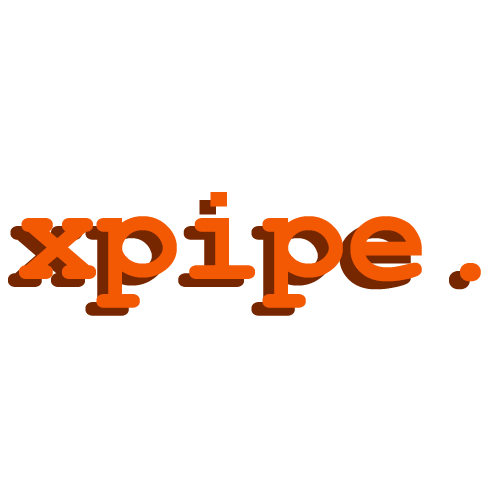
<style>
.page{position:relative;width:500px;height:500px;background:#ffffff}
.page>*{position:absolute;margin:0}
.t1{font:137.5px "CourierNewPS-BoldMT";color:#f35903}
.t2{font:137.5px "CourierNewPS-BoldMT"}
</style>
<div class="page">
<p class="t1" style="left:19px;top:192px;width:462px;height:116px">xpipe.</p>
<p class="t2" style="left:8px;top:200px;width:462px;height:116px">xpipe.</p>
</div>
